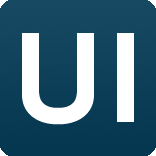
<style>
.page{position:relative;width:156px;height:156px;background:#ffffff}
.page>*{position:absolute;margin:0}
.t1{font:125px "AkzidenzGrotesk-Bold";letter-spacing:0.05em;color:#ffffff}
</style>
<div class="page">
<p class="t1" style="left:22px;top:33px;width:112px;height:92px">UI</p>
</div>
